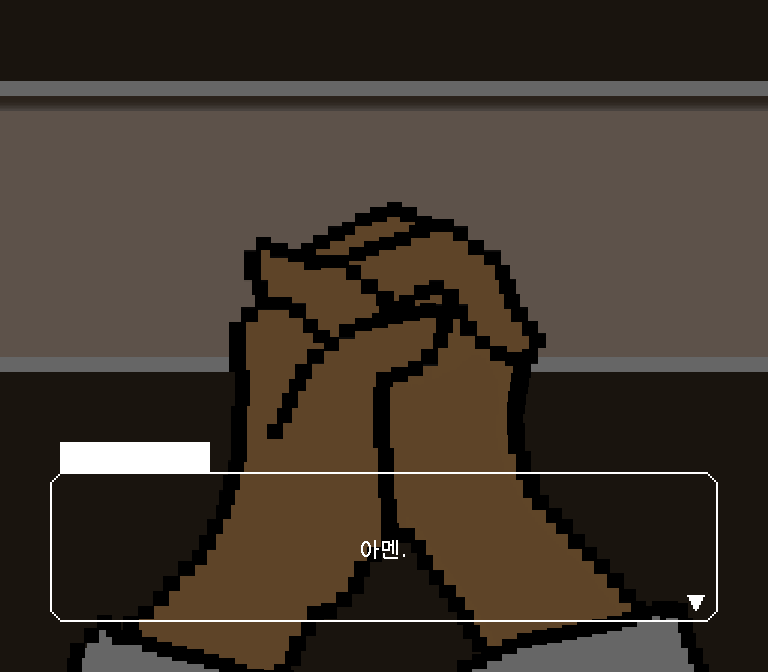
<style>
.page{position:relative;width:768px;height:672px;background:#19140e}
.page>*{position:absolute;margin:0}
.t1{font:20px "Gulim";color:#ffffff;font-weight:bold}
</style>
<div class="page">
<p class="t1" style="left:361px;top:540px;width:44px;height:19px">아멘.</p>
</div>
